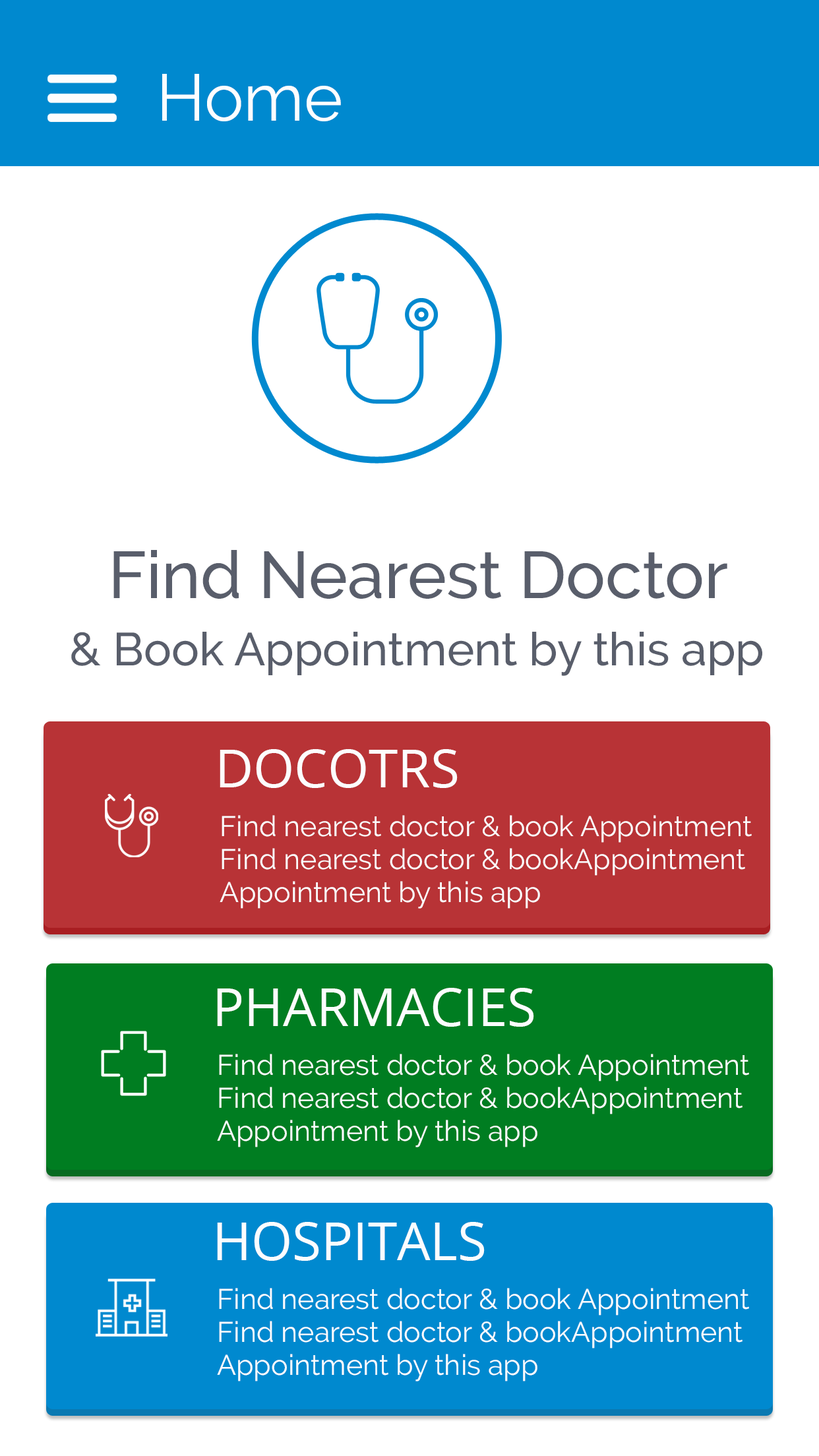
<style>
.page{position:relative;width:819px;height:1456px;background:#ffffff}
.page>*{position:absolute;margin:0}
.t1{font:65.9px "Raleway-Regular";color:#fdfeff}
.t2{font:65.9px "Raleway-Medium";color:#595e6b}
.t3{font:46.2px "Raleway-Medium";color:#595e6b}
.t4{font:52.8px "OpenSans";color:#fcfdfe}
.t5{font:28.4px/33px "Raleway-Regular";color:#fcfdfe}
</style>
<div class="page">
<p class="t1" style="left:162px;top:74px;width:179px;height:47px">Home</p>
<p class="t2" style="left:113px;top:550px;width:614px;height:49px">Find Nearest Doctor</p>
<p class="t3" style="left:71px;top:632px;width:691px;height:44px">&amp; Book Appointment by this app</p>
<p class="t4" style="left:220px;top:749px;width:238px;height:39px">DOCOTRS</p>
<p class="t5" style="left:220px;top:815px;width:532px;height:94px">Find nearest doctor &amp; book Appointment<br>Find nearest doctor &amp; bookAppointment<br>Appointment by this app</p>
<p class="t4" style="left:217px;top:988px;width:317px;height:39px">PHARMACIES</p>
<p class="t5" style="left:217px;top:1054px;width:532px;height:93px">Find nearest doctor &amp; book Appointment<br>Find nearest doctor &amp; bookAppointment<br>Appointment by this app</p>
<p class="t4" style="left:217px;top:1222px;width:268px;height:39px">HOSPITALS</p>
<p class="t5" style="left:217px;top:1288px;width:532px;height:93px">Find nearest doctor &amp; book Appointment<br>Find nearest doctor &amp; bookAppointment<br>Appointment by this app</p>
</div>
